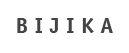
<style>
.page{position:relative;width:129px;height:53px;background:#ffffff}
.page>*{position:absolute;margin:0}
.t1{font:22.3px "OfficinaSansLT-Bold";color:#444444}
</style>
<div class="page">
<p class="t1" style="left:17px;top:18px;width:96px;height:15px">B I J I K A</p>
</div>
